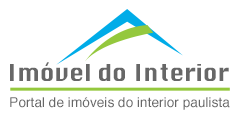
<style>
.page{position:relative;width:240px;height:120px;background:#ffffff}
.page>*{position:absolute;margin:0}
.t1{font:22.6px "Silom";color:#676767}
.t2{font:13.4px "Helvetica";color:#676767}
</style>
<div class="page">
<p class="t1" style="left:10px;top:62px;width:219px;height:19px">Imóvel do Interior</p>
<p class="t2" style="left:10px;top:97px;width:220px;height:13px">Portal de imóveis do interior paulista</p>
</div>
